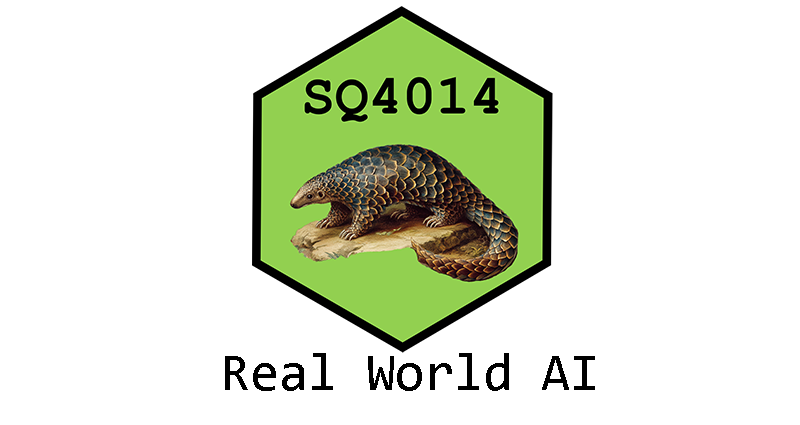
<style>
.page{position:relative;width:800px;height:425px;background:#ffffff}
.page>*{position:absolute;margin:0}
.t1{font:53px "Consolas";color:#000000}
</style>
<div class="page">
<p class="t1" style="left:225px;top:353px;width:370px;height:38px">Real World AI</p>
</div>
